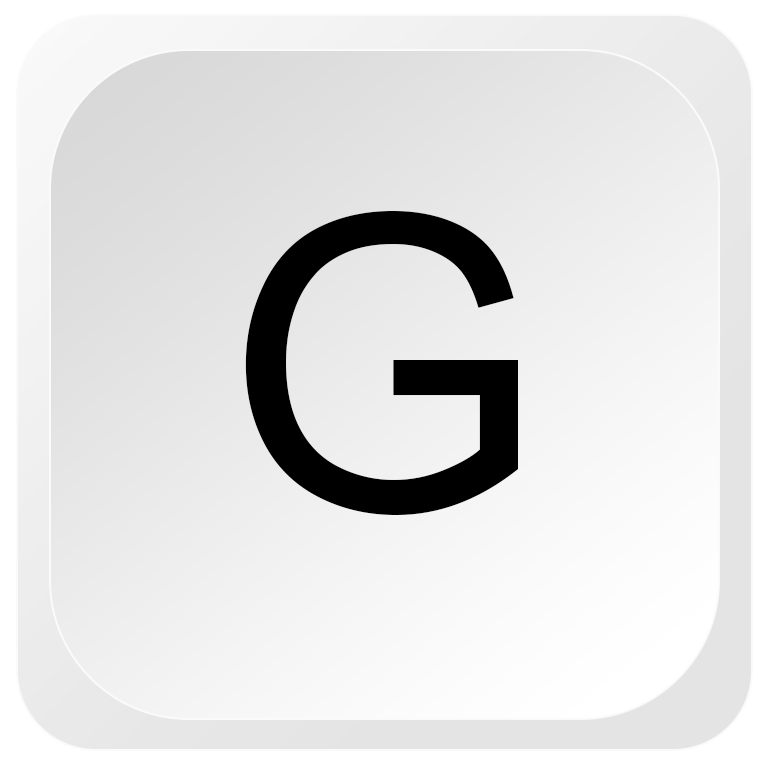
<style>
.page{position:relative;width:768px;height:768px}
.page>*{position:absolute;margin:0}
.t1{font:411px "ArialMT";color:#000000}
</style>
<div class="page">
<p class="t1" style="left:245px;top:211px;width:273px;height:304px">G</p>
</div>
